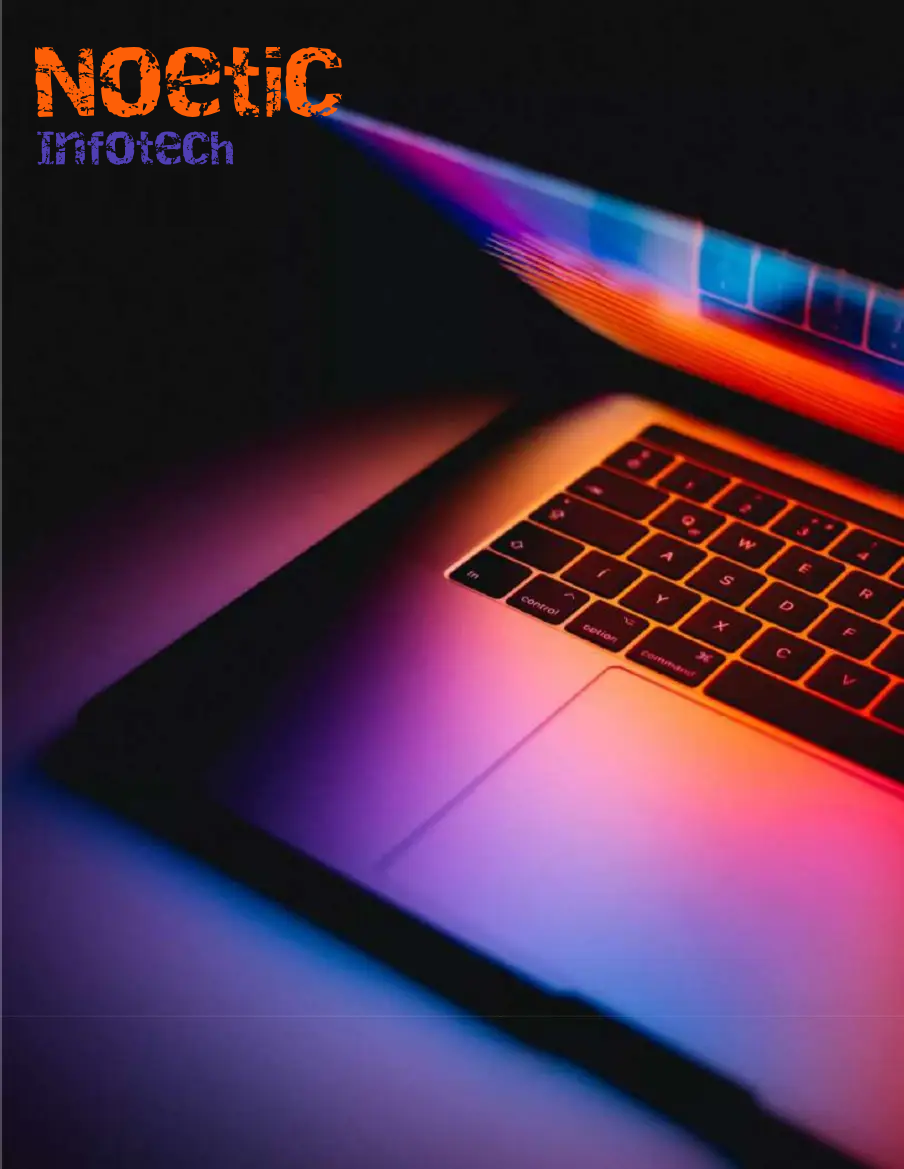
<style>
.page{position:relative;width:904px;height:1169px}
.page>*{position:absolute;margin:0}
.t1{font:70px "Destroy";color:#fd5f07}
.t2{font:33px "Destroy";color:#503fb4}
</style>
<div class="page">
<p class="t1" style="left:34px;top:46px;width:309px;height:72px">Noetic</p>
<p class="t2" style="left:37px;top:131px;width:197px;height:34px">Infotech</p>
</div>
